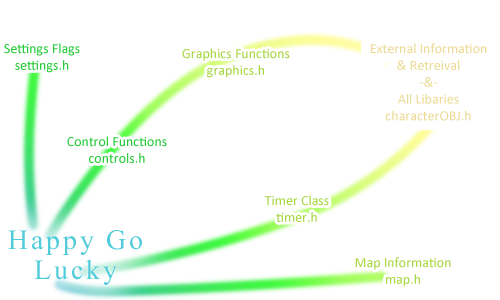
<style>
.page{position:relative;width:500px;height:300px;background:#ffffff}
.page>*{position:absolute;margin:0}
.t1{font:14px "Calibri";color:#28ca3b}
.t2{font:14px "Calibri";color:#a9d743}
.t3{font:14px "Calibri";color:#ecdb97}
.t4{font:36px/30px "Kokila";letter-spacing:0.075em;color:#4fcbda}
.t5{font:14px "Calibri";color:#aad845}
</style>
<div class="page">
<p class="t1" style="left:4px;top:43px;width:76px;height:30px;text-align:center">Settings Flags<br>settings.h</p>
<p class="t2" style="left:182px;top:48px;width:108px;height:30px;text-align:center">Graphics Functions<br>graphics.h</p>
<p class="t3" style="left:371px;top:43px;width:116px;height:78px;text-align:center">External Information<br>&amp; Retreival<br>-&amp;-<br>All Libaries<br>characterOBJ.h</p>
<p class="t1" style="left:67px;top:136px;width:100px;height:27px;text-align:center">Control Functions<br>controls.h</p>
<p class="t2" style="left:264px;top:195px;width:65px;height:27px;text-align:center">Timer Class<br>timer.h</p>
<p class="t4" style="left:8px;top:230px;width:134px;height:55px;text-align:center">Happy Go<br>Lucky</p>
<p class="t5" style="left:355px;top:257px;width:96px;height:30px;text-align:center">Map Information<br>map.h</p>
</div>
